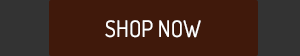
<style>
.page{position:relative;width:300px;height:56px;background:#40190b}
.page>*{position:absolute;margin:0}
.t1{font:22.7px "Dosis-Medium";color:#ffffff}
</style>
<div class="page">
<p class="t1" style="left:105px;top:20px;width:96px;height:18px">SHOP NOW</p>
</div>
